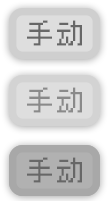
<style>
.page{position:relative;width:108px;height:201px}
.page>*{position:absolute;margin:0}
.t1{font:27.3px "Zpix";color:#676767}
.t2{font:27.3px "Zpix";color:#8a8a8a}
</style>
<div class="page">
<p class="t1" style="left:27px;top:20px;width:55px;height:26px">手动</p>
<p class="t2" style="left:27px;top:87px;width:55px;height:26px">手动</p>
<p class="t1" style="left:27px;top:157px;width:55px;height:26px">手动</p>
</div>
